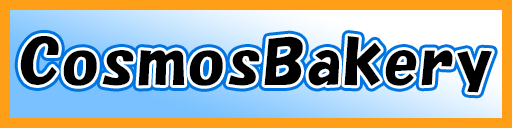
<style>
.page{position:relative;width:512px;height:128px}
.page>*{position:absolute;margin:0}
.t1{font:60px "HGSSoeiKakupoptai";letter-spacing:0.03em;color:#000000;scale:1.1 1}
</style>
<div class="page">
<p class="t1" style="left:20px;top:36px;width:472px;height:57px">CosmosBakery</p>
</div>
